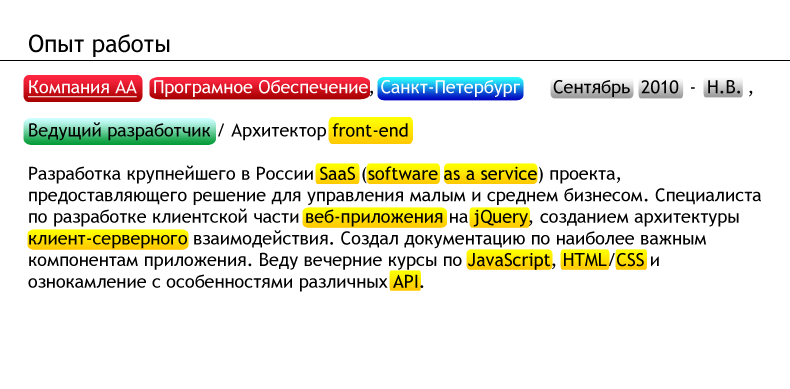
<style>
.page{position:relative;width:790px;height:389px;background:#ffffff}
.page>*{position:absolute;margin:0}
.t1{font:24px "TrebuchetMS";color:#000000}
.t2{font:18px "TrebuchetMS";color:#000000}
.t3{font:18px "TrebuchetMS";color:#ffffff;text-decoration:underline}
.t4{font:18px "TrebuchetMS";color:#ffffff}
</style>
<div class="page">
<p class="t1" style="left:29px;top:34px;width:141px;height:23px">Опыт работы</p>
<p class="t2" style="left:28px;top:80px;width:733px;height:212px"><span class="t3">Компания АА   </span><span class="t4">Програмное Обеспечение</span>, <span class="t4">Санкт-Петербург</span>      Сентябрь  2010  -  Н.В. ,<br><br>Ведущий разработчик / Архитектор front-end<br><br>Разработка крупнейшего в России SaaS (software as a service) проекта, предоставляющего решение для управления малым и среднем бизнесом. Cпециалиста по разработке клиентской части веб-приложения на jQuery, cозданием архитектуры клиент-серверного взаимодействия. Создал документацию по наиболее важным компонентам приложения. Веду вечерние курсы по JavaScript, HTML/CSS и ознокамление с особенностями различных API.</p>
</div>
